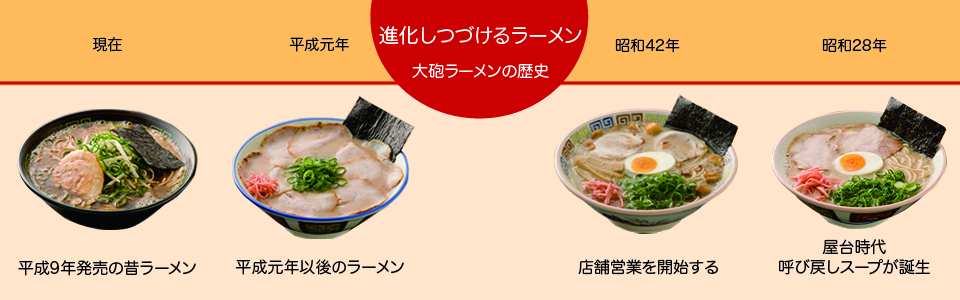
<style>
.page{position:relative;width:960px;height:300px;background:#ffe5cc}
.page>*{position:absolute;margin:0}
.t1{font:20px/34px "HiraMaruProN-W4";color:#ffffff}
.t2{font:16px/34px "HiraMaruProN-W4";color:#ffffff}
.t3{font:15px "HiraMaruProN-W4";color:#000000}
.t4{font:16px/20px "HiraMaruProN-W4";color:#000000}
.t5{font:16px "HiraMaruProN-W4";color:#000000}
.t6{font:15.9px "HiraMaruProN-W4";color:#000000}
</style>
<div class="page">
<p class="t1" style="left:379px;top:25px;width:203px;height:54px;text-align:center">進化しつづけるラーメン<br><span class="t2">大砲ラーメンの歴史</span></p>
<p class="t3" style="left:93px;top:36px;width:29px;height:16px">現在</p>
<p class="t3" style="left:289px;top:37px;width:60px;height:15px">平成元年</p>
<p class="t3" style="left:615px;top:38px;width:65px;height:15px">昭和42年</p>
<p class="t3" style="left:822px;top:38px;width:65px;height:15px">昭和28年</p>
<p class="t4" style="left:779px;top:239px;width:151px;height:36px;text-align:center">屋台時代<br>呼び戻しスープが誕生</p>
<p class="t5" style="left:18px;top:260px;width:178px;height:16px">平成9年発売の昔ラーメン</p>
<p class="t5" style="left:235px;top:259px;width:169px;height:16px">平成元年以後のラーメン</p>
<p class="t6" style="left:578px;top:259px;width:140px;height:16px">店舗営業を開始する</p>
</div>
